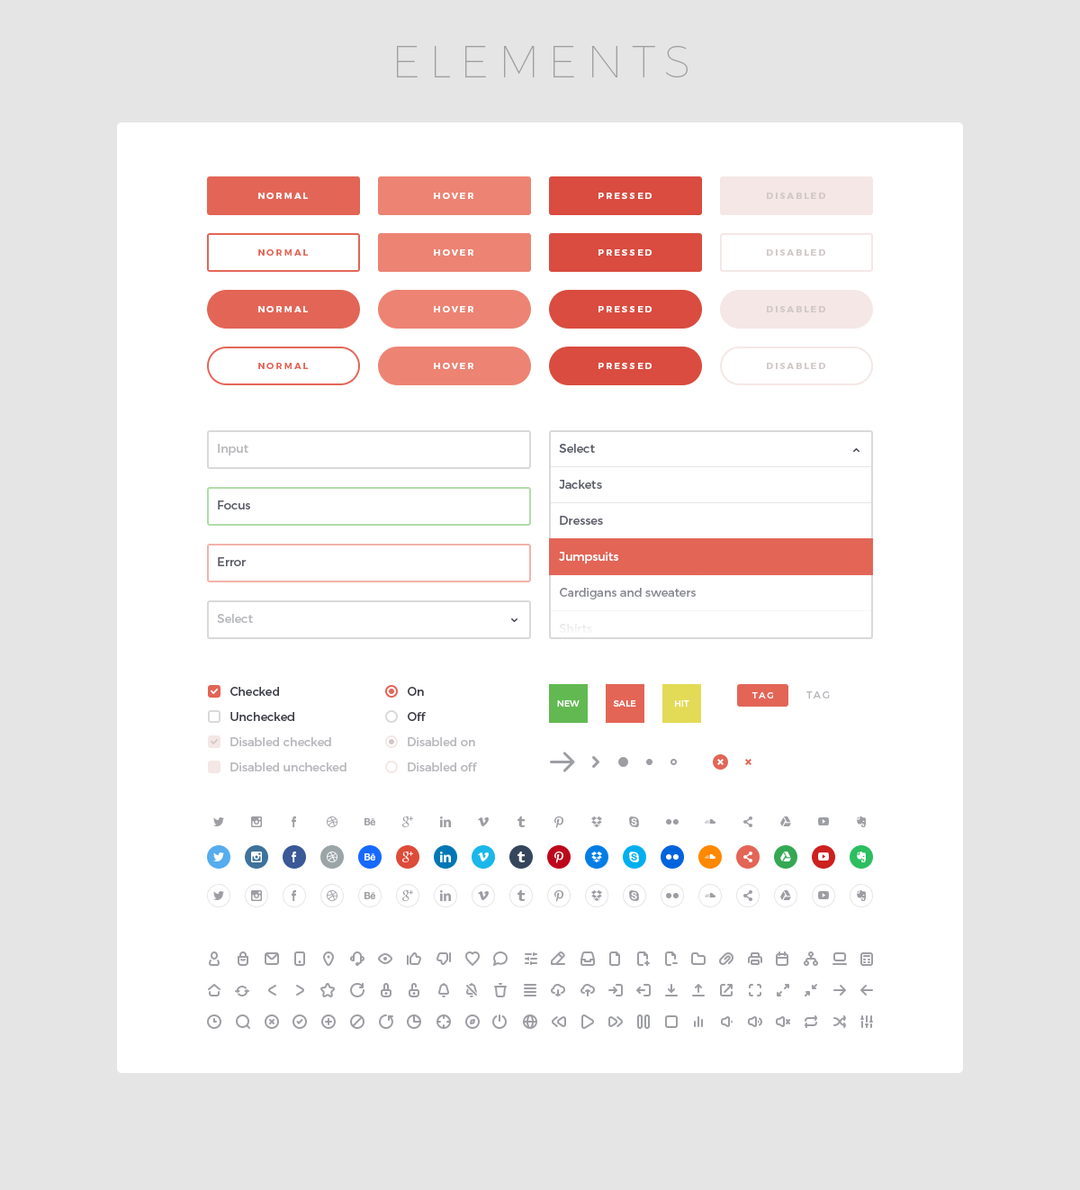
<style>
.page{position:relative;width:1080px;height:1190px;background:#ffffff}
.page>*{position:absolute;margin:0}
.t1{font:45px "Montserrat-Hairline";letter-spacing:0.2em;color:#9f9fa2;text-transform:uppercase}
.t2{font:9px "Montserrat-Bold";letter-spacing:0.2em;color:#ffffff;text-transform:uppercase}
.t3{font:9px "Montserrat-Bold";letter-spacing:0.2em;color:#d1c7c7;text-transform:uppercase}
.t4{font:9px "Montserrat-Bold";letter-spacing:0.2em;color:#e36556;text-transform:uppercase}
.t5{font:11.7px "Montserrat-Regular";color:#b8b9bd}
.t6{font:11.7px/36px "Montserrat-Regular";color:#5b5d69}
.t7{font:11.7px/36px "Montserrat-Regular";color:#ffffff}
.t8{font:11.7px "Montserrat-Regular";color:#5b5d69}
.t9{font:11.7px/25.2px "Montserrat-Regular";color:#3c3d48}
.t10{font:9px "Montserrat-Regular";color:#ffffff;text-transform:uppercase}
.t11{font:9px "Montserrat-Regular";letter-spacing:0.2em;color:#ffffff;text-transform:uppercase}
.t12{font:9.9px "Montserrat-Regular";letter-spacing:0.2em;color:#b8b9bd;text-transform:uppercase}
.t13{font:11.7px/25.2px "Montserrat-Regular";color:#b8b9bd}
</style>
<div class="page">
<p class="t1" style="left:397px;top:46px;width:291px;height:31px">Elements</p>
<p class="t2" style="left:258px;top:193px;width:50px;height:6px">Normal</p>
<p class="t2" style="left:434px;top:193px;width:40px;height:6px">Hover</p>
<p class="t2" style="left:599px;top:193px;width:53px;height:6px">Pressed</p>
<p class="t3" style="left:767px;top:193px;width:58px;height:6px">Disabled</p>
<p class="t4" style="left:258px;top:249px;width:50px;height:7px">Normal</p>
<p class="t2" style="left:434px;top:249px;width:40px;height:7px">Hover</p>
<p class="t2" style="left:599px;top:249px;width:53px;height:7px">Pressed</p>
<p class="t3" style="left:767px;top:249px;width:58px;height:7px">Disabled</p>
<p class="t2" style="left:258px;top:306px;width:50px;height:6px">Normal</p>
<p class="t2" style="left:434px;top:306px;width:40px;height:6px">Hover</p>
<p class="t2" style="left:599px;top:306px;width:53px;height:6px">Pressed</p>
<p class="t3" style="left:767px;top:306px;width:58px;height:6px">Disabled</p>
<p class="t4" style="left:258px;top:363px;width:50px;height:6px">Normal</p>
<p class="t2" style="left:434px;top:363px;width:40px;height:6px">Hover</p>
<p class="t2" style="left:599px;top:363px;width:53px;height:6px">Pressed</p>
<p class="t3" style="left:767px;top:363px;width:58px;height:6px">Disabled</p>
<p class="t5" style="left:218px;top:444px;width:30px;height:11px">Input</p>
<p class="t6" style="left:559px;top:444px;width:137px;height:189px">Select<br>Jackets<br>Dresses<br><span class="t7">Jumpsuits<br></span>Cardigans and sweaters<br>Shirts</p>
<p class="t8" style="left:218px;top:500px;width:32px;height:9px">Focus</p>
<p class="t8" style="left:218px;top:557px;width:29px;height:9px">Error</p>
<p class="t5" style="left:217px;top:614px;width:36px;height:9px">Select</p>
<p class="t9" style="left:230px;top:687px;width:64px;height:34px">Checked<br>Unchecked</p>
<p class="t9" style="left:408px;top:687px;width:19px;height:34px">On<br>Off</p>
<p class="t10" style="left:557px;top:700px;width:23px;height:7px">new</p>
<p class="t10" style="left:613px;top:700px;width:23px;height:7px">sale</p>
<p class="t10" style="left:675px;top:700px;width:14px;height:7px">hit</p>
<p class="t11" style="left:752px;top:692px;width:21px;height:6px">Tag</p>
<p class="t12" style="left:806px;top:691px;width:24px;height:7px">Tag</p>
<p class="t13" style="left:230px;top:737px;width:117px;height:34px">Disabled checked<br>Disabled unchecked</p>
<p class="t13" style="left:408px;top:737px;width:70px;height:34px">Disabled on<br>Disabled off</p>
</div>
